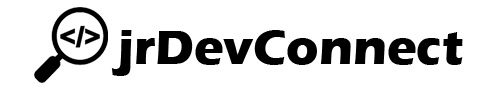
<style>
.page{position:relative;width:504px;height:94px;background:#ffffff}
.page>*{position:absolute;margin:0}
.t1{font:50px "ErasITC-Bold";color:#000000}
</style>
<div class="page">
<p class="t1" style="left:111px;top:30px;width:352px;height:46px">jrDevConnect</p>
</div>
